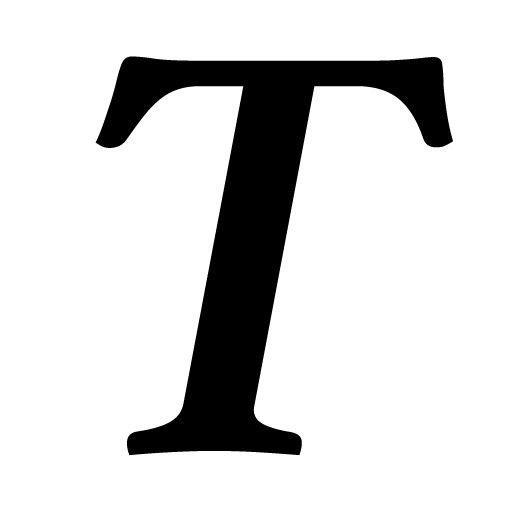
<style>
.page{position:relative;width:512px;height:512px;background:#ffffff}
.page>*{position:absolute;margin:0}
.t1{font:600px "Athelas-BoldItalic";color:#000000}
</style>
<div class="page">
<p class="t1" style="left:95px;top:56px;width:358px;height:400px">T</p>
</div>
